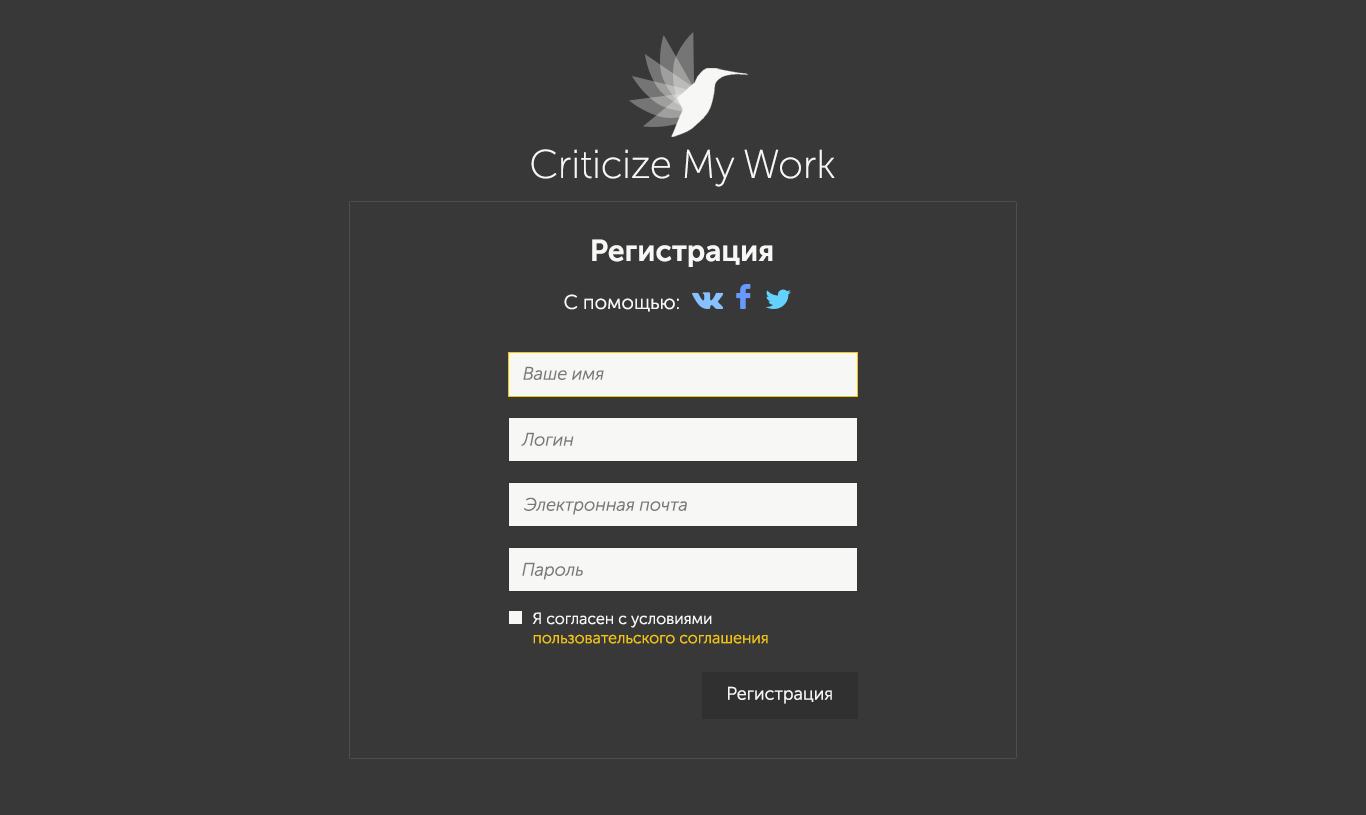
<style>
.page{position:relative;width:1366px;height:815px;background:#383838}
.page>*{position:absolute;margin:0}
.t1{font:40px "MuseoSansCyrl-100";color:#f7f7f5}
.t2{font:30px "MuseoSansCyrl-700";color:#f7f7f5}
.t3{font:20px "MuseoSansCyrl-300";color:#f7f7f5}
.t4{font:18px "MuseoSansCyrl-300Italic";color:#797978}
.t5{font:16px "MuseoSansCyrl-300";color:#f1c40f}
.t6{font:16px "MuseoSansCyrl-300";color:#f6f6f6}
.t7{font:18px "MuseoSansCyrl-300";color:#f6f6f6}
</style>
<div class="page">
<p class="t1" style="left:531px;top:149px;width:304px;height:38px">Criticize My Work</p>
<p class="t2" style="left:592px;top:239px;width:181px;height:28px">Регистрация</p>
<p class="t3" style="left:564px;top:294px;width:115px;height:18px">С помощью:</p>
<p class="t4" style="left:523px;top:366px;width:81px;height:14px">Ваше имя</p>
<p class="t4" style="left:521px;top:432px;width:53px;height:14px">Логин</p>
<p class="t4" style="left:524px;top:497px;width:163px;height:18px">Электронная почта</p>
<p class="t4" style="left:522px;top:562px;width:61px;height:18px">Пароль</p>
<p class="t5" style="left:532px;top:612px;width:236px;height:32px;text-align:right"><span class="t6">Я согласен с условиями <br></span>пользовательского соглашения</p>
<p class="t7" style="left:728px;top:686px;width:104px;height:18px">Регистрация</p>
</div>
